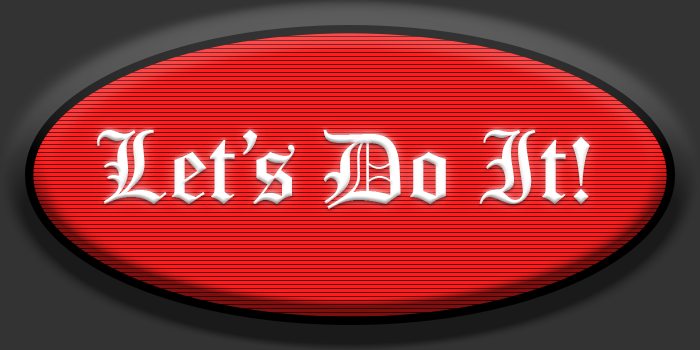
<style>
.page{position:relative;width:700px;height:350px}
.page>*{position:absolute;margin:0}
.t1{font:100px "OldEnglishTextMT";color:#ffffff}
</style>
<div class="page">
<p class="t1" style="left:97px;top:130px;width:493px;height:79px">Let’s Do It!</p>
</div>
